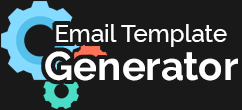
<style>
.page{position:relative;width:242px;height:110px;background:#191919}
.page>*{position:absolute;margin:0}
.t1{font:24px/38px "Raleway-Medium";color:#ffffff}
.t2{font:40px/38px "Raleway-Bold";color:#ffffff}
</style>
<div class="page">
<p class="t1" style="left:45px;top:24px;width:193px;height:57px;text-align:center">Email Template <br><span class="t2">Generator</span></p>
</div>
